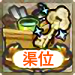
<style>
.page{position:relative;width:75px;height:75px}
.page>*{position:absolute;margin:0}
.t1{font:16px "GothicMB101Pr6N-Medium";color:#ff5a00}
</style>
<div class="page">
<p class="t1" style="left:23px;top:51px;width:31px;height:16px">渠位</p>
</div>
